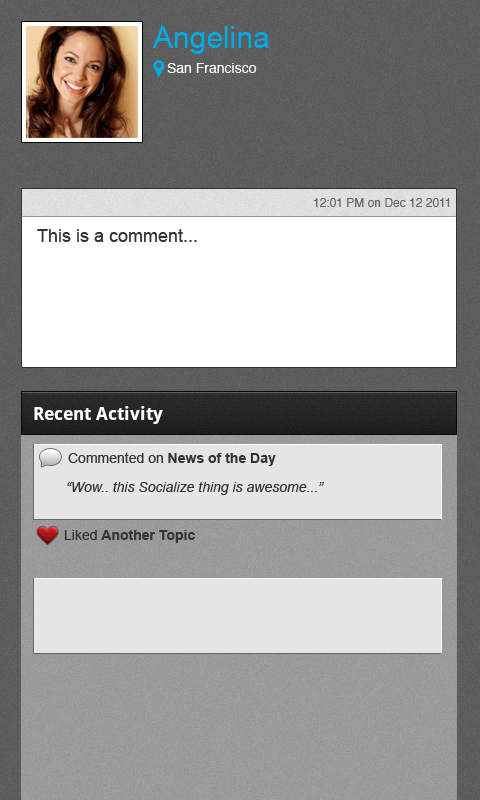
<style>
.page{position:relative;width:480px;height:800px}
.page>*{position:absolute;margin:0}
.t1{font:30px "ArialMT";color:#00abe3}
.t2{font:14px "Helvetica";color:#ffffff}
.t3{font:12px "Helvetica";color:#666666}
.t4{font:18px "ArialMT";color:#333333}
.t5{font:14px "Arial-BoldMT";color:#333333}
.t6{font:14px "ArialMT";color:#333333}
.t7{font:14px "Arial-ItalicMT";color:#333333}
</style>
<div class="page">
<p class="t1" style="left:152px;top:26px;width:117px;height:28px">Angelina</p>
<p class="t2" style="left:167px;top:63px;width:90px;height:10px">San Francisco</p>
<p class="t3" style="left:314px;top:198px;width:136px;height:9px">12:01 PM on Dec 12 2011</p>
<p class="t4" style="left:37px;top:229px;width:160px;height:13px">This is a comment...</p>
<p class="t5" style="left:68px;top:452px;width:208px;height:14px"><span class="t6">Commented on </span>News of the Day</p>
<p class="t7" style="left:67px;top:482px;width:257px;height:13px">“Wow.. this Socialize thing is awesome...”</p>
<p class="t5" style="left:64px;top:530px;width:131px;height:13px"><span class="t6">Liked </span>Another Topic</p>
</div>
